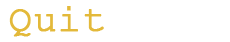
<style>
.page{position:relative;width:230px;height:42px;background:#ffffff}
.page>*{position:absolute;margin:0}
.t1{font:38.9px "CourierNewPSMT";color:#e3b93a;font-weight:bold}
</style>
<div class="page">
<p class="t1" style="left:9px;top:6px;width:95px;height:31px">Quit</p>
</div>
